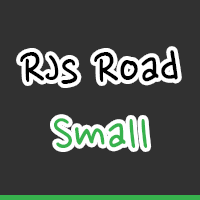
<style>
.page{position:relative;width:200px;height:200px;background:#313131}
.page>*{position:absolute;margin:0}
.t1{font:54px "NanumPen";color:#000000}
.t2{font:54px "NanumPen";color:#37b24d}
</style>
<div class="page">
<p class="t1" style="left:20px;top:50px;width:158px;height:34px">RJs Road</p>
<p class="t2" style="left:54px;top:118px;width:94px;height:30px">Small</p>
</div>
